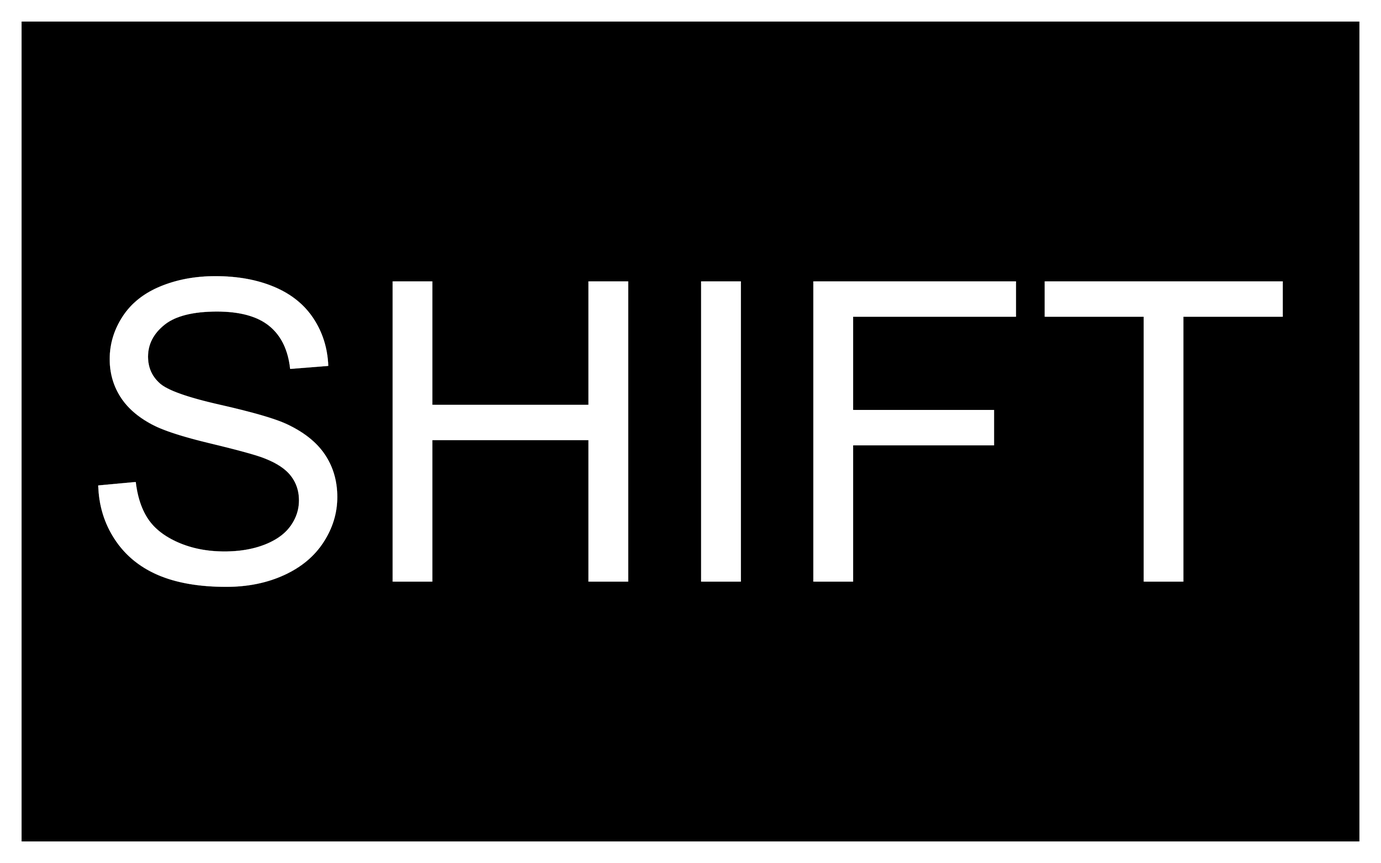
<style>
.page{position:relative;width:1381px;height:863px;background:#000000}
.page>*{position:absolute;margin:0}
.t1{font:419.7px "ArialMT";color:#ffffff}
</style>
<div class="page">
<p class="t1" style="left:98px;top:276px;width:1185px;height:311px">SHIFT</p>
</div>
